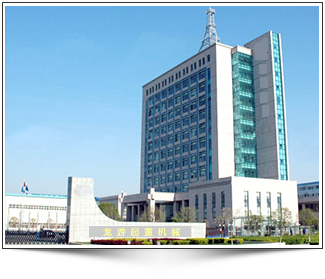
<style>
.page{position:relative;width:325px;height:279px}
.page>*{position:absolute;margin:0}
.t1{font:8.6px "MicrosoftYaHei";color:#ffff99}
</style>
<div class="page">
<p class="t1" style="left:103px;top:228px;width:77px;height:9px">龙  游  起  重  机  械</p>
</div>
